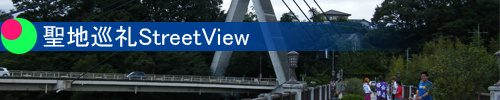
<style>
.page{position:relative;width:500px;height:100px}
.page>*{position:absolute;margin:0}
.t1{font:24px "MS-PGothic";color:#fefefe}
</style>
<div class="page">
<p class="t1" style="left:43px;top:25px;width:207px;height:22px">聖地巡礼StreetView</p>
</div>
